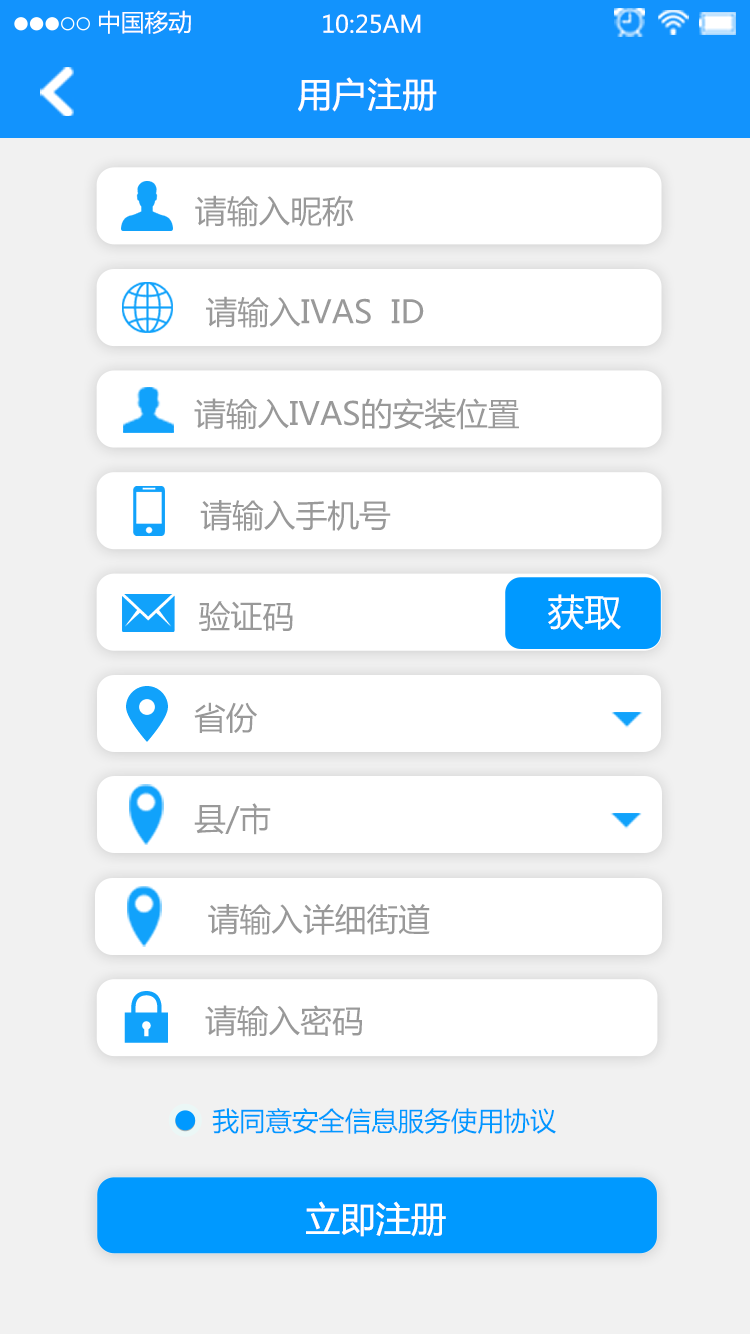
<style>
.page{position:relative;width:750px;height:1334px;background:#ffffff}
.page>*{position:absolute;margin:0}
.t1{font:23.7px "MicrosoftYaHei";color:#ffffff}
.t2{font:34px "MicrosoftYaHei";color:#ffffff;font-weight:bold}
.t3{font:31.7px "MicrosoftYaHei";color:#999999}
.t4{font:36.7px "MicrosoftYaHei";color:#ffffff}
.t5{font:26.4px "MicrosoftYaHei";color:#0099ff}
.t6{font:35.2px "MicrosoftYaHei";color:#ffffff}
</style>
<div class="page">
<p class="t1" style="left:99px;top:10px;width:92px;height:24px">中国移动</p>
<p class="t1" style="left:323px;top:14px;width:98px;height:19px">10:25AM</p>
<p class="t2" style="left:298px;top:77px;width:139px;height:35px">用户注册</p>
<p class="t3" style="left:195px;top:195px;width:159px;height:32px">请输入昵称</p>
<p class="t3" style="left:206px;top:296px;width:218px;height:32px">请输入IVAS  ID</p>
<p class="t3" style="left:194px;top:398px;width:325px;height:32px">请输入IVAS的安装位置</p>
<p class="t3" style="left:200px;top:500px;width:191px;height:31px">请输入手机号</p>
<p class="t3" style="left:199px;top:601px;width:94px;height:30px">验证码</p>
<p class="t4" style="left:548px;top:594px;width:73px;height:36px">获取</p>
<p class="t3" style="left:194px;top:702px;width:63px;height:31px">省份</p>
<p class="t3" style="left:194px;top:803px;width:77px;height:32px">县/市</p>
<p class="t3" style="left:208px;top:904px;width:222px;height:31px">请输入详细街道</p>
<p class="t3" style="left:205px;top:1005px;width:157px;height:32px">请输入密码</p>
<p class="t5" style="left:212px;top:1108px;width:344px;height:26px">我同意安全信息服务使用协议</p>
<p class="t6" style="left:306px;top:1201px;width:140px;height:36px">立即注册</p>
</div>
